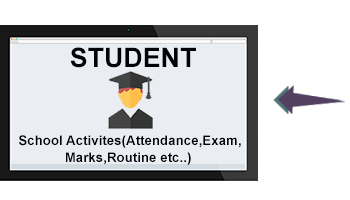
<style>
.page{position:relative;width:350px;height:200px;background:#ffffff}
.page>*{position:absolute;margin:0}
.t1{font:26.8px "Arial-BoldMT";color:#00040a}
.t2{font:13.3px "Arial-BoldMT";color:#00040a}
</style>
<div class="page">
<p class="t1" style="left:70px;top:47px;width:126px;height:21px">STUDENT</p>
<p class="t2" style="left:19px;top:135px;width:222px;height:13px">School Activites(Attendance,Exam,</p>
<p class="t2" style="left:66px;top:152px;width:125px;height:13px">Marks,Routine etc..)</p>
</div>
